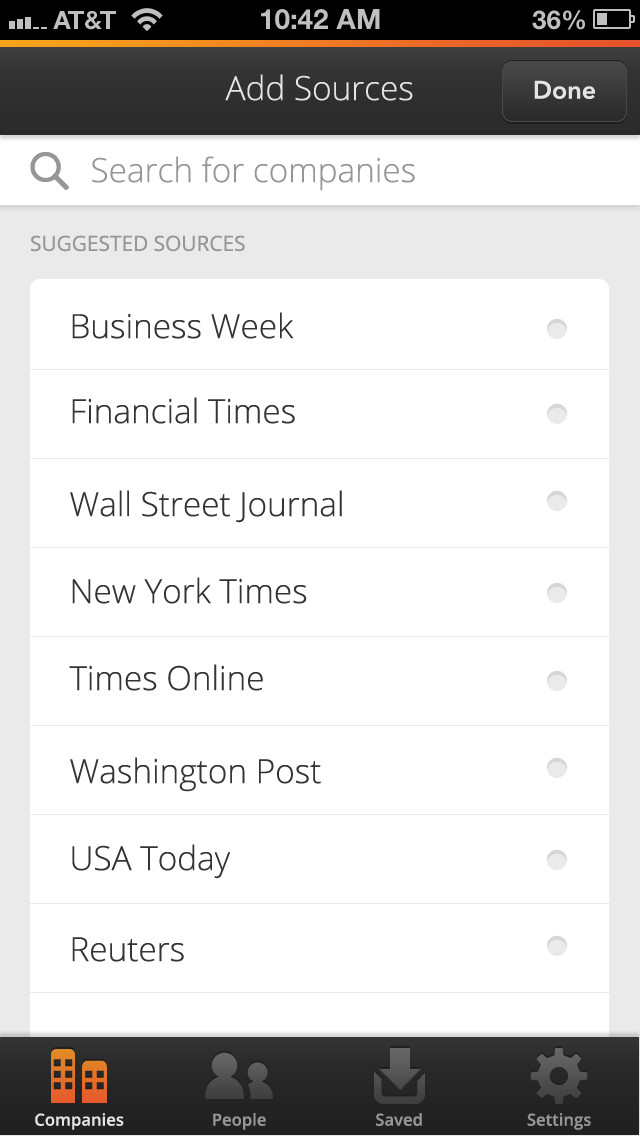
<style>
.page{position:relative;width:640px;height:1136px;background:#ffffff}
.page>*{position:absolute;margin:0}
.t1{font:33.3px "OpenSans-Light";color:#e5e5e5}
.t2{font:25px "AvenirNext-DemiBold";color:#e5e5e5}
.t3{font:33.3px "OpenSans-Light";color:#969696}
.t4{font:20.8px "OpenSans";color:#969696}
.t5{font:33.3px "OpenSans-Light";color:#343434}
.t6{font:16.7px "OpenSans-Semibold";color:#e5e5e5}
.t7{font:16.7px "OpenSans-Semibold";color:#969696}
</style>
<div class="page">
<p class="t1" style="left:225px;top:74px;width:188px;height:27px">Add Sources</p>
<p class="t2" style="left:534px;top:80px;width:61px;height:19px">Done</p>
<p class="t3" style="left:92px;top:156px;width:323px;height:35px">Search for companies</p>
<p class="t4" style="left:31px;top:235px;width:214px;height:17px">SUGGESTED SOURCES</p>
<p class="t5" style="left:72px;top:312px;width:222px;height:27px">Business Week</p>
<p class="t5" style="left:72px;top:397px;width:223px;height:27px">Financial Times</p>
<p class="t5" style="left:70px;top:490px;width:272px;height:33px">Wall Street Journal</p>
<p class="t5" style="left:72px;top:577px;width:235px;height:27px">New York Times</p>
<p class="t5" style="left:69px;top:664px;width:194px;height:27px">Times Online</p>
<p class="t5" style="left:70px;top:757px;width:251px;height:35px">Washington Post</p>
<p class="t5" style="left:72px;top:844px;width:159px;height:35px">USA Today</p>
<p class="t5" style="left:72px;top:937px;width:112px;height:25px">Reuters</p>
<p class="t6" style="left:35px;top:1113px;width:89px;height:17px">Companies</p>
<p class="t7" style="left:213px;top:1113px;width:53px;height:17px">People</p>
<p class="t7" style="left:376px;top:1113px;width:46px;height:13px">Saved</p>
<p class="t7" style="left:527px;top:1113px;width:64px;height:17px">Settings</p>
</div>
